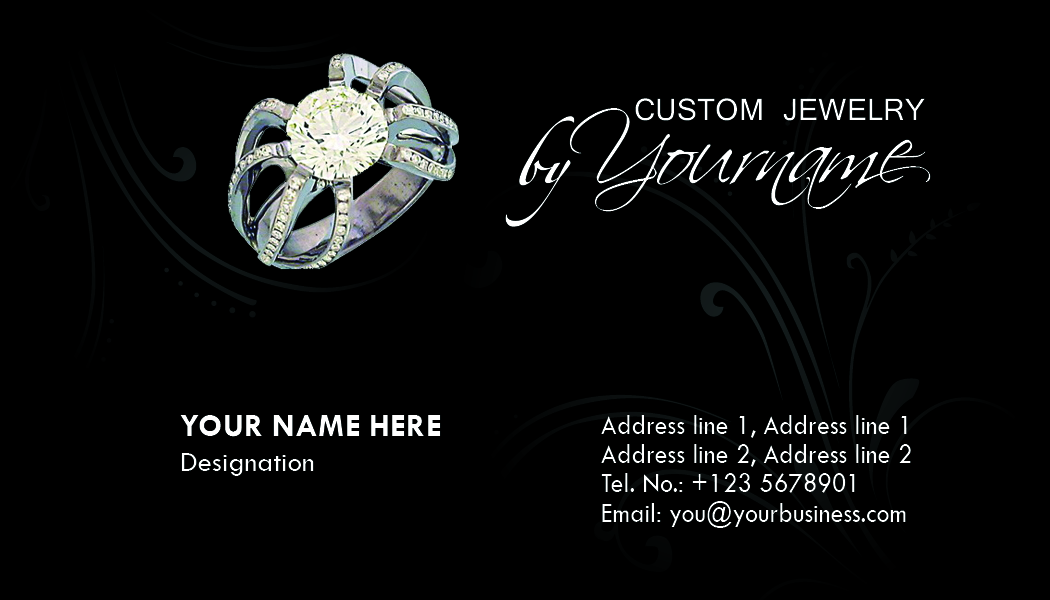
<style>
.page{position:relative;width:1050px;height:600px;background:#000000}
.page>*{position:absolute;margin:0}
.t1{font:33.3px "Vrinda";color:#ffffff}
.t2{font:98.9px "Scriptina";color:#ffffff}
.t3{font:98.9px "ZapfinoForteLTPro";color:#ffffff}
.t4{font:33.3px "TwCenMT-Bold";color:#ffffff}
.t5{font:29.2px "TwCenMT-Regular";color:#ffffff}
.t6{font:29.2px/29.2px "TwCenMT-Regular";color:#ffffff;scale:0.9 1}
</style>
<div class="page">
<p class="t1" style="left:635px;top:98px;width:290px;height:23px">CUSTOM JEWELRY</p>
<p class="t2" style="left:505px;top:108px;width:426px;height:119px"><span class="t3">by</span>Yourname</p>
<p class="t4" style="left:180px;top:415px;width:261px;height:61px">YOUR NAME HERE<br><span class="t5">Designation</span></p>
<p class="t6" style="left:601px;top:415px;width:310px;height:113px">Address line 1, Address line 1<br>Address line 2, Address line 2<br>Tel. No.: +123 5678901<br>Email: you@yourbusiness.com</p>
</div>
